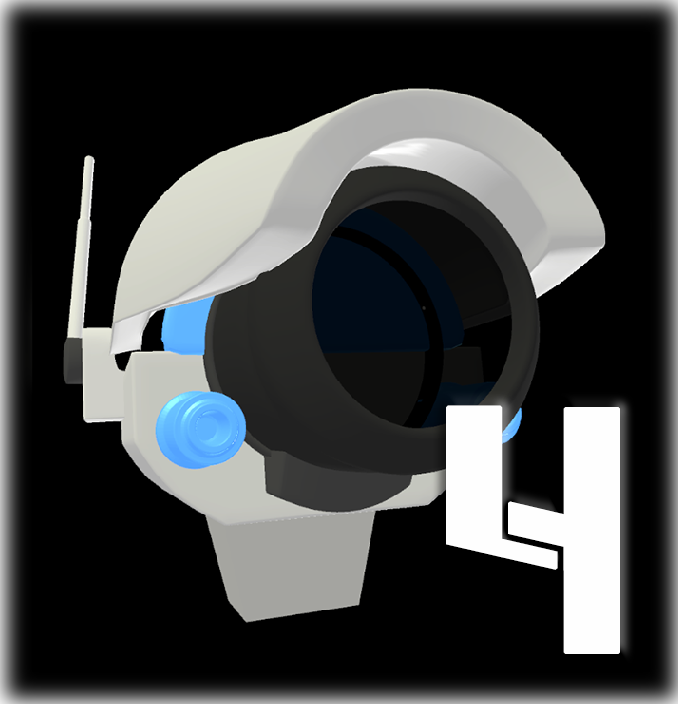
<style>
.page{position:relative;width:678px;height:704px;background:#000000}
.page>*{position:absolute;margin:0}
.t1{font:348.6px "OriginTechDemoRegular";color:#fefefe;font-weight:bold}
</style>
<div class="page">
<p class="t1" style="left:446px;top:405px;width:174px;height:249px">4</p>
</div>
